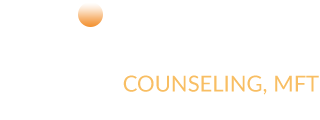
<style>
.page{position:relative;width:320px;height:120px;background:#ffffff}
.page>*{position:absolute;margin:0}
.t1{font:22px "Lato-Regular";color:#f8be63}
</style>
<div class="page">
<p class="t1" style="left:123px;top:75px;width:196px;height:20px">COUNSELING, MFT</p>
</div>
